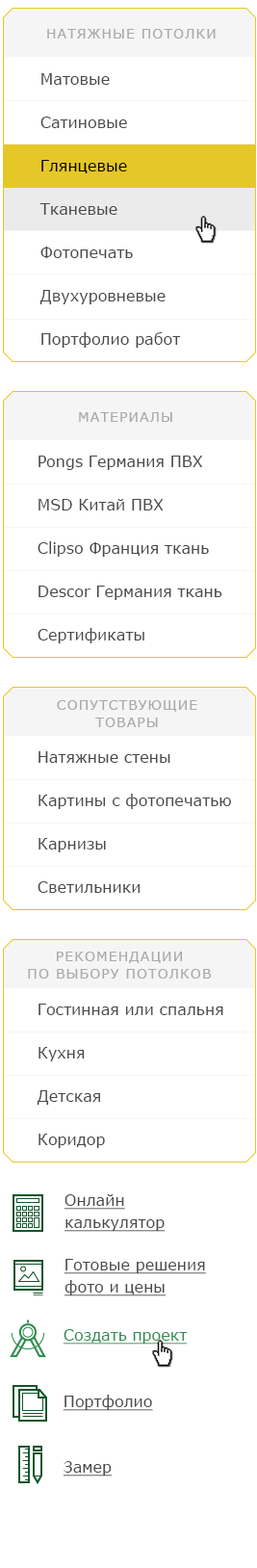
<style>
.page{position:relative;width:257px;height:1568px;background:#ffffff}
.page>*{position:absolute;margin:0}
.t1{font:13.5px "Verdana";letter-spacing:0.075em;color:#aaaaaa;text-transform:uppercase}
.t2{font:15.4px/33.7px "Verdana";color:#494949}
.t3{font:15.4px/33.7px "Verdana";color:#000000}
.t4{font:13.5px/17.3px "Verdana";letter-spacing:0.075em;color:#aaaaaa;text-transform:uppercase}
.t5{font:15.4px/22.2px "Verdana";color:#494949;text-decoration:underline}
.t6{font:15.4px "Verdana";color:#308d51;text-decoration:underline}
.t7{font:15.4px "Verdana";color:#494949;text-decoration:underline}
</style>
<div class="page">
<p class="t1" style="left:47px;top:29px;width:169px;height:10px">Натяжные потолки</p>
<p class="t2" style="left:39px;top:73px;width:142px;height:275px">Матовые<br>Сатиновые<br><span class="t3">Глянцевые<br></span>Тканевые<br>Фотопечать<br>Двухуровневые<br>Портфолио работ</p>
<p class="t1" style="left:79px;top:412px;width:93px;height:10px">материалы</p>
<p class="t2" style="left:38px;top:456px;width:184px;height:187px">Pongs Германия ПВХ<br>MSD Китай ПВХ<br>Clipso Франция ткань<br>Descor Германия ткань<br>Сертификаты</p>
<p class="t4" style="left:57px;top:700px;width:140px;height:27px;text-align:center">сопутствующие<br>товары</p>
<p class="t2" style="left:38px;top:751px;width:193px;height:142px">Натяжные стены<br>Картины с фотопечатью<br>Карнизы<br>Светильники</p>
<p class="t4" style="left:28px;top:952px;width:184px;height:27px;text-align:center">рекомендации<br>по выбору потолков</p>
<p class="t2" style="left:37px;top:1004px;width:186px;height:144px">Гостинная или спальня<br>Кухня<br>Детская<br>Коридор</p>
<p class="t5" style="left:64px;top:1194px;width:102px;height:38px">Онлайн<br>калькулятор</p>
<p class="t5" style="left:64px;top:1259px;width:142px;height:37px">Готовые решения<br>фото и цены</p>
<p class="t6" style="left:63px;top:1329px;width:125px;height:16px">Создать проект</p>
<p class="t7" style="left:63px;top:1395px;width:90px;height:16px">Портфолио</p>
<p class="t7" style="left:63px;top:1461px;width:49px;height:16px">Замер</p>
</div>
